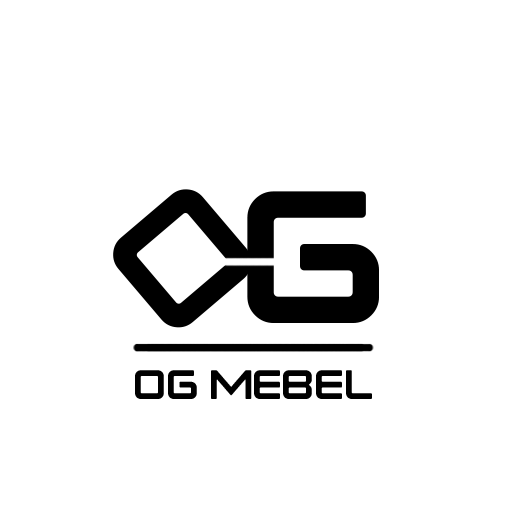
<style>
.page{position:relative;width:507px;height:516px;background:#ffffff}
.page>*{position:absolute;margin:0}
.t1{font:41px "BOWLER-Regular";color:#000000}
</style>
<div class="page">
<p class="t1" style="left:135px;top:370px;width:237px;height:29px">OG MEBEL</p>
</div>
